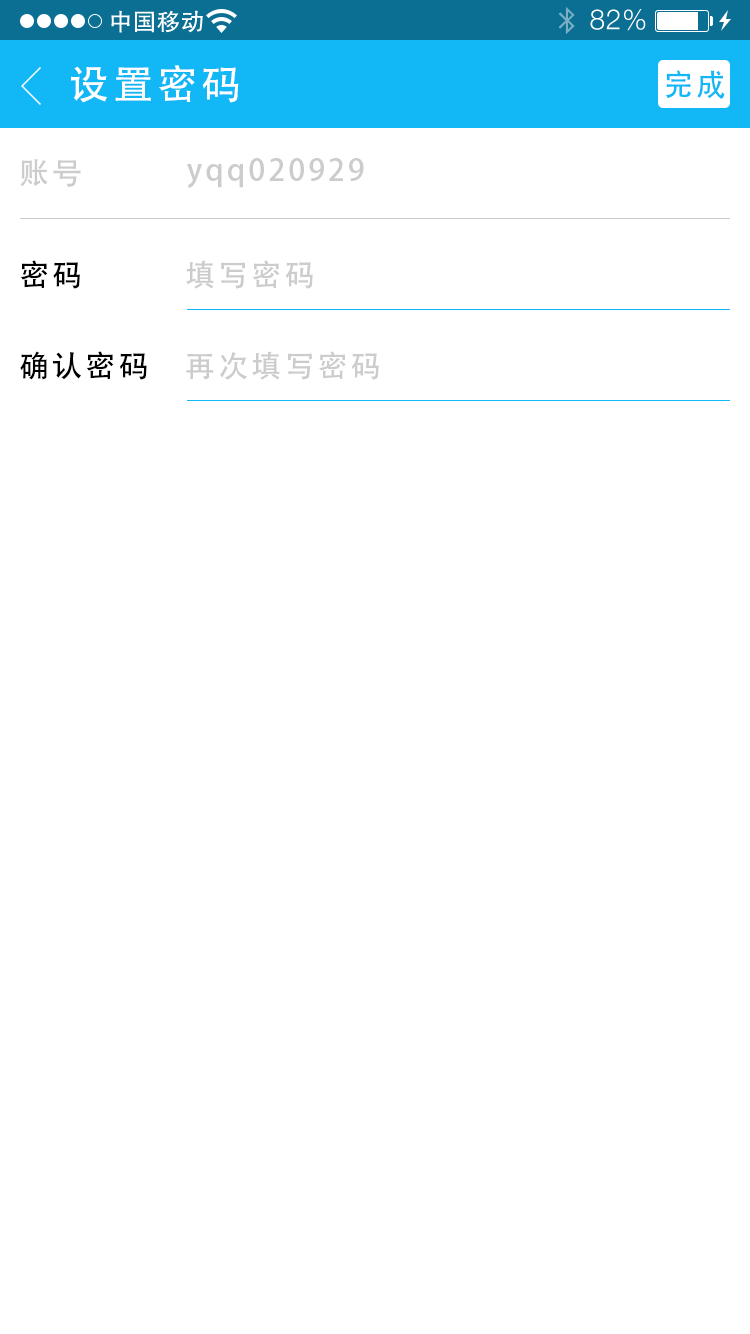
<style>
.page{position:relative;width:750px;height:1334px;background:#ffffff}
.page>*{position:absolute;margin:0}
.t1{font:40px "AdobeHeitiStd-Regular";letter-spacing:0.104em;color:#ffffff}
.t2{font:30px "AdobeHeitiStd-Regular";letter-spacing:0.104em;color:#12b8f6}
.t3{font:30px "AdobeHeitiStd-Regular";letter-spacing:0.104em;color:#cccccc}
.t4{font:30px "AdobeHeitiStd-Regular";letter-spacing:0.104em;color:#000000}
</style>
<div class="page">
<p class="t1" style="left:71px;top:65px;width:168px;height:38px">设置密码</p>
<p class="t2" style="left:666px;top:70px;width:59px;height:29px">完成</p>
<p class="t3" style="left:20px;top:159px;width:61px;height:28px">账号</p>
<p class="t3" style="left:187px;top:158px;width:177px;height:30px">yqq020929</p>
<p class="t4" style="left:20px;top:260px;width:60px;height:29px">密码</p>
<p class="t3" style="left:186px;top:260px;width:127px;height:29px">填写密码</p>
<p class="t4" style="left:20px;top:351px;width:127px;height:29px">确认密码</p>
<p class="t3" style="left:186px;top:351px;width:193px;height:29px">再次填写密码</p>
</div>
